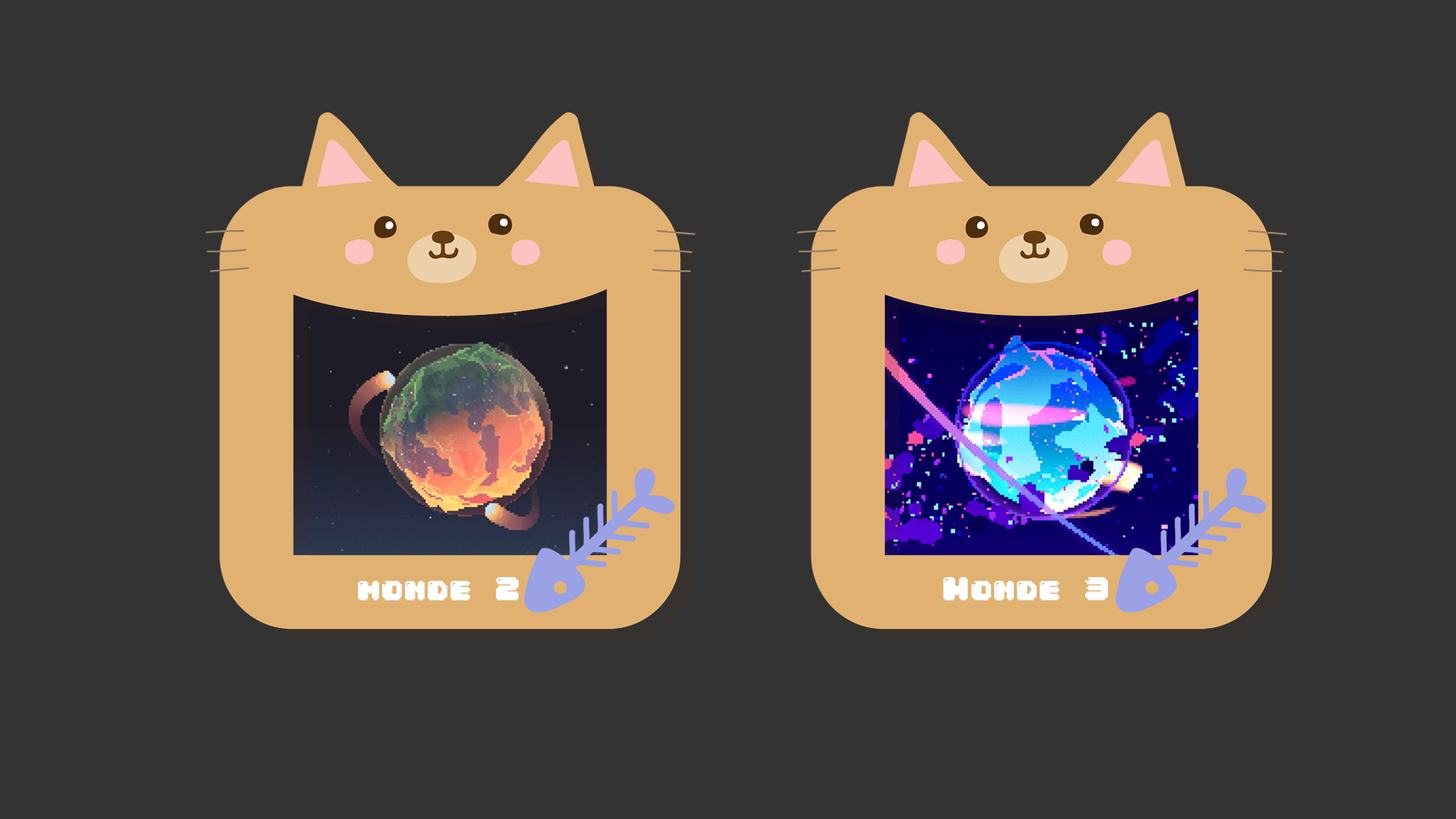
<style>
.page{position:relative;width:1456px;height:819px;background:#333333}
.page>*{position:absolute;margin:0}
.t1{font:27.3px "04b30";color:#ffffff;font-weight:bold}
</style>
<div class="page">
<p class="t1" style="left:358px;top:577px;width:161px;height:24px">monde 2</p>
<p class="t1" style="left:943px;top:577px;width:165px;height:24px">Monde 3</p>
</div>
